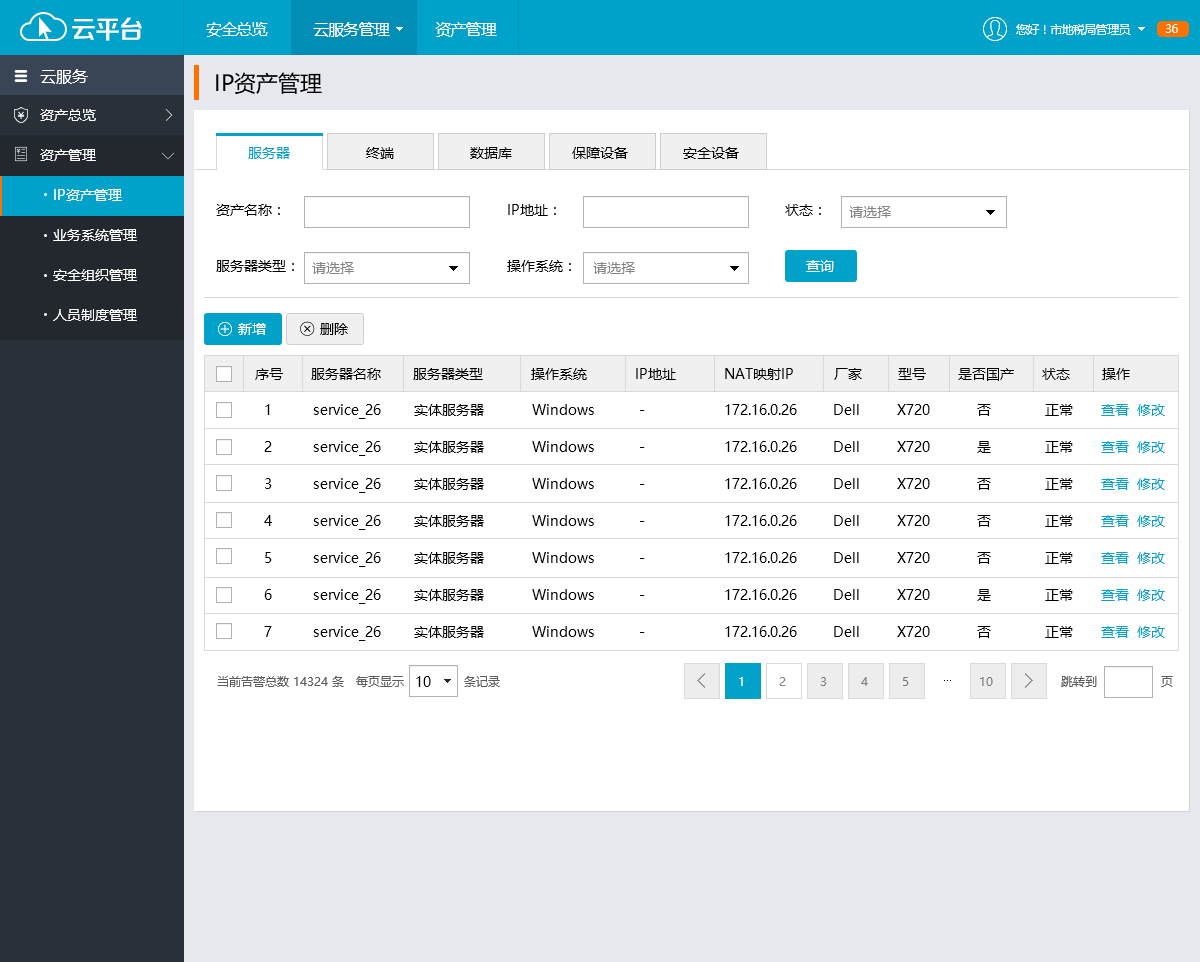
<style>
.page{position:relative;width:1200px;height:962px;background:#ffffff}
.page>*{position:absolute;margin:0}
.t1{font:25.4px "FZZZHONGJW--GB1-0";letter-spacing:-0.05em;color:#ffffff}
.t2{font:16px "MicrosoftYaHei";letter-spacing:-0.05em;color:#ffffff}
.t3{font:12px "MicrosoftYaHei";letter-spacing:-0.05em;color:#ffffff}
.t4{font:16px "MicrosoftYaHei";color:#ffffff}
.t5{font:22px "MicrosoftYaHei";color:#000000}
.t6{font:14px "MicrosoftYaHei";color:#ffffff}
.t7{font:14px "MicrosoftYaHei";color:#00a2ca}
.t8{font:14px "MicrosoftYaHei";color:#000000}
.t9{font:14px/40px "MicrosoftYaHei";color:#ffffff}
.t10{font:14px "MicrosoftYaHei";color:#858585}
.t11{font:14px/37px "MicrosoftYaHei";color:#000000}
.t12{font:14px/37px "MicrosoftYaHei";color:#00a2ca}
</style>
<div class="page">
<p class="t1" style="left:72px;top:17px;width:70px;height:24px">云平台</p>
<p class="t2" style="left:206px;top:22px;width:291px;height:15px">安全总览           云服务管理           资产管理</p>
<p class="t3" style="left:1016px;top:24px;width:115px;height:11px">您好！市地税局管理员</p>
<p class="t3" style="left:1165px;top:24px;width:13px;height:9px">36</p>
<p class="t4" style="left:40px;top:69px;width:48px;height:15px">云服务</p>
<p class="t5" style="left:216px;top:72px;width:106px;height:22px">IP资产管理</p>
<p class="t6" style="left:40px;top:109px;width:56px;height:12px">资产总览</p>
<p class="t6" style="left:40px;top:149px;width:56px;height:12px">资产管理</p>
<p class="t7" style="left:248px;top:147px;width:42px;height:12px">服务器</p>
<p class="t8" style="left:366px;top:147px;width:28px;height:12px">终端</p>
<p class="t8" style="left:470px;top:147px;width:42px;height:12px">数据库</p>
<p class="t8" style="left:572px;top:147px;width:56px;height:12px">保障设备</p>
<p class="t8" style="left:683px;top:147px;width:56px;height:12px">安全设备</p>
<p class="t9" style="left:53px;top:189px;width:84px;height:132px">IP资产管理<br>业务系统管理<br>安全组织管理<br>人员制度管理</p>
<p class="t8" style="left:216px;top:204px;width:64px;height:12px">资产名称：</p>
<p class="t8" style="left:508px;top:204px;width:48px;height:12px">IP地址：</p>
<p class="t8" style="left:785px;top:204px;width:36px;height:12px">状态：</p>
<p class="t10" style="left:849px;top:206px;width:42px;height:12px">请选择</p>
<p class="t8" style="left:216px;top:260px;width:78px;height:12px">服务器类型：</p>
<p class="t10" style="left:312px;top:262px;width:42px;height:12px">请选择</p>
<p class="t8" style="left:507px;top:260px;width:64px;height:12px">操作系统：</p>
<p class="t10" style="left:593px;top:262px;width:42px;height:12px">请选择</p>
<p class="t6" style="left:806px;top:260px;width:28px;height:12px">查询</p>
<p class="t6" style="left:238px;top:323px;width:28px;height:12px">新增</p>
<p class="t8" style="left:320px;top:323px;width:28px;height:12px">删除</p>
<p class="t8" style="left:255px;top:368px;width:875px;height:13px">序号       服务器名称        服务器类型            操作系统            IP地址            NAT映射IP          厂家         型号        是否国产       状态        操作</p>
<p class="t11" style="left:264px;top:404px;width:8px;height:233px">1<br>2<br>3<br>4<br>5<br>6<br>7</p>
<p class="t11" style="left:313px;top:404px;width:68px;height:237px">service_26<br>service_26<br>service_26<br>service_26<br>service_26<br>service_26<br>service_26</p>
<p class="t11" style="left:414px;top:404px;width:70px;height:234px">实体服务器<br>实体服务器<br>实体服务器<br>实体服务器<br>实体服务器<br>实体服务器<br>实体服务器</p>
<p class="t11" style="left:532px;top:404px;width:62px;height:233px">Windows<br>Windows<br>Windows<br>Windows<br>Windows<br>Windows<br>Windows</p>
<p class="t11" style="left:640px;top:410px;width:5px;height:223px">-<br> -<br> -<br> -<br> -<br> -<br> -</p>
<p class="t11" style="left:725px;top:404px;width:72px;height:233px">172.16.0.26<br>172.16.0.26<br>172.16.0.26<br>172.16.0.26<br>172.16.0.26<br>172.16.0.26<br>172.16.0.26</p>
<p class="t11" style="left:834px;top:404px;width:25px;height:233px">Dell<br>Dell<br>Dell<br>Dell<br>Dell<br>Dell<br>Dell</p>
<p class="t11" style="left:897px;top:404px;width:33px;height:233px">X720<br>X720<br>X720<br>X720<br>X720<br>X720<br>X720</p>
<p class="t11" style="left:977px;top:404px;width:14px;height:234px">否<br>是<br>否<br>否<br>否<br>是<br>否</p>
<p class="t11" style="left:1045px;top:404px;width:28px;height:234px">正常<br>正常<br>正常<br>正常<br>正常<br>正常<br>正常</p>
<p class="t12" style="left:1101px;top:404px;width:64px;height:234px">查看  修改<br>查看  修改<br>查看  修改<br>查看  修改<br>查看  修改<br>查看  修改<br>查看  修改</p>
</div>
